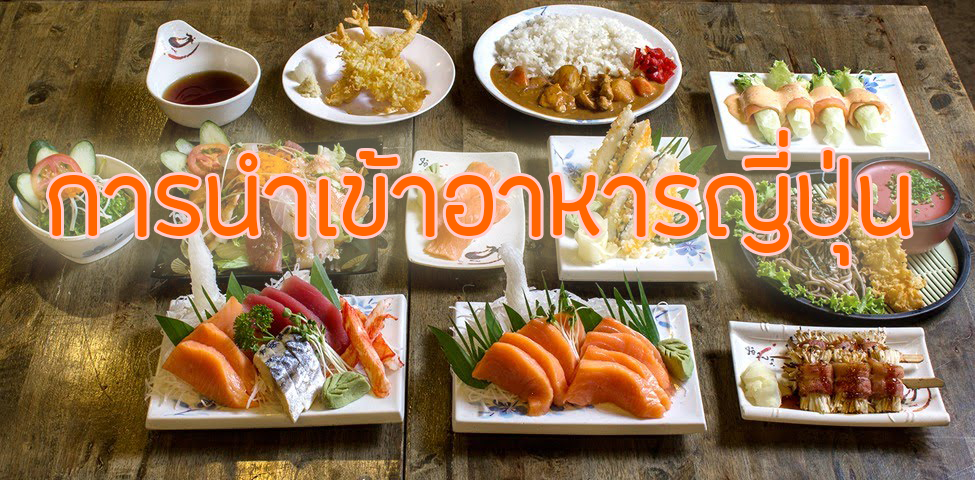
<style>
.page{position:relative;width:975px;height:480px}
.page>*{position:absolute;margin:0}
.t1{font:140.8px "FCLamoonRegular";color:#ff6600}
</style>
<div class="page">
<p class="t1" style="left:48px;top:130px;width:863px;height:136px">การนำเข้าอาหารญี่ปุ่น</p>
</div>
